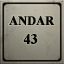
<style>
.page{position:relative;width:64px;height:64px}
.page>*{position:absolute;margin:0}
.t1{font:12.7px "TimesNewRomanPS-BoldMT";letter-spacing:0.005em;color:#040404;text-transform:uppercase;font-weight:bold;scale:0.95 1}
.t2{font:14.3px "TimesNewRomanPS-BoldMT";letter-spacing:0.005em;color:#040404;text-transform:uppercase;font-weight:bold;scale:0.97 1}
</style>
<div class="page">
<p class="t1" style="left:9px;top:16px;width:46px;height:10px">andar</p>
<p class="t2" style="left:23px;top:34px;width:15px;height:10px">43</p>
</div>
